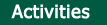
<style>
.page{position:relative;width:107px;height:25px;background:#005941}
.page>*{position:absolute;margin:0}
.t1{font:18px "Tahoma";letter-spacing:0.02em;color:#ffffff;font-weight:bold}
</style>
<div class="page">
<p class="t1" style="left:11px;top:4px;width:79px;height:15px">Activities</p>
</div>
